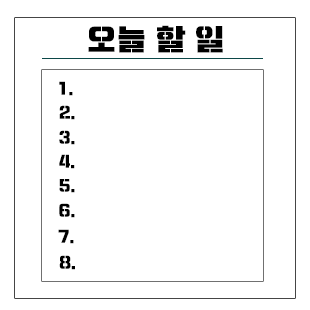
<style>
.page{position:relative;width:310px;height:310px;background:#ffffff}
.page>*{position:absolute;margin:0}
.t1{font:30px "Typo_SsangmunDong_St";color:#000000}
.t2{font:16px "Typo_SsangmunDong_St";color:#000000}
</style>
<div class="page">
<p class="t1" style="left:88px;top:25px;width:135px;height:28px">오늘 할 일</p>
<p class="t2" style="left:59px;top:81px;width:14px;height:15px">1.</p>
<p class="t2" style="left:59px;top:105px;width:16px;height:15px">2.</p>
<p class="t2" style="left:59px;top:130px;width:16px;height:15px">3.</p>
<p class="t2" style="left:59px;top:154px;width:16px;height:15px">4.</p>
<p class="t2" style="left:59px;top:179px;width:16px;height:14px">5.</p>
<p class="t2" style="left:59px;top:203px;width:16px;height:15px">6.</p>
<p class="t2" style="left:58px;top:229px;width:16px;height:15px">7.</p>
<p class="t2" style="left:59px;top:255px;width:16px;height:15px">8.</p>
</div>
